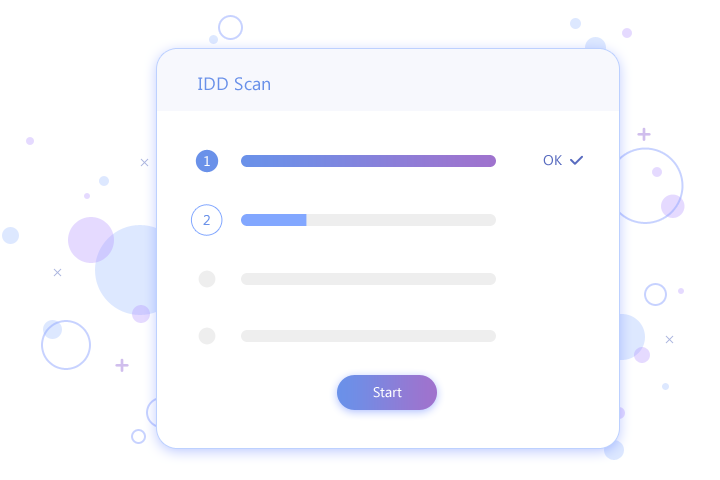
<style>
.page{position:relative;width:720px;height:480px;background:#ffffff}
.page>*{position:absolute;margin:0}
.t1{font:18px "SegoeUI";color:#6a91e9}
.t2{font:14px "SegoeUI";color:#ffffff}
.t3{font:14px "SegoeUI";color:#586bbf}
.t4{font:14px "SegoeUI";color:#6a91e9}
</style>
<div class="page">
<p class="t1" style="left:198px;top:77px;width:72px;height:14px">IDD Scan</p>
<p class="t2" style="left:204px;top:156px;width:6px;height:10px">1</p>
<p class="t3" style="left:543px;top:155px;width:19px;height:11px">OK</p>
<p class="t4" style="left:203px;top:215px;width:7px;height:10px">2</p>
<p class="t2" style="left:373px;top:387px;width:29px;height:11px">Start</p>
</div>
